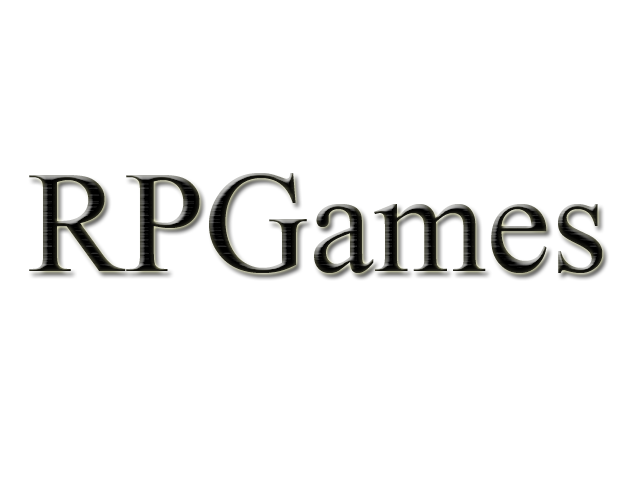
<style>
.page{position:relative;width:640px;height:480px;background:#ffffff}
.page>*{position:absolute;margin:0}
.t1{font:145px "TimesNewRomanPSMT"}
</style>
<div class="page">
<p class="t1" style="left:27px;top:150px;width:580px;height:165px">RPGames</p>
</div>
